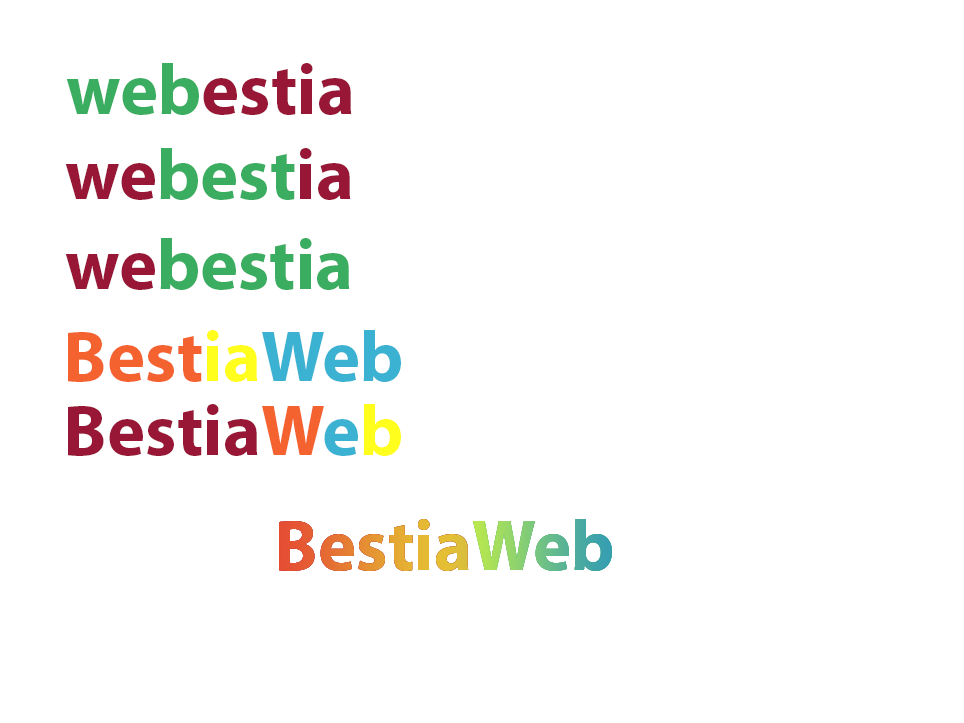
<style>
.page{position:relative;width:964px;height:723px;background:#ffffff}
.page>*{position:absolute;margin:0}
.t1{font:72px "MyriadPro-Bold";color:#981737}
.t2{font:72px "MyriadPro-Bold";color:#3bad61}
.t3{font:72px "MyriadPro-Bold";color:#f4632f}
.t4{font:72px "MyriadPro-Bold";color:#fffe1c}
.t5{font:72px "MyriadPro-Bold";color:#3bb2d1}
</style>
<div class="page">
<p class="t1" style="left:66px;top:63px;width:286px;height:52px"><span class="t2">web</span>estia</p>
<p class="t2" style="left:65px;top:148px;width:286px;height:52px"><span class="t1">we</span>best<span class="t1">ia</span></p>
<p class="t2" style="left:65px;top:238px;width:285px;height:52px"><span class="t1">we</span>bestia</p>
<p class="t3" style="left:68px;top:330px;width:333px;height:52px">Best<span class="t4">ia</span><span class="t5">Web</span></p>
<p class="t1" style="left:68px;top:404px;width:333px;height:52px">Bestia<span class="t3">W</span><span class="t5">e</span><span class="t4">b</span></p>
</div>
